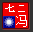
<style>
.page{position:relative;width:33px;height:32px;background:#f20000}
.page>*{position:absolute;margin:0}
.t1{font:10.4px "SimSun";color:#ffffff}
.t2{font:11.7px "SimSun";color:#ffffff}
</style>
<div class="page">
<p class="t1" style="left:5px;top:4px;width:20px;height:8px">七二</p>
<p class="t2" style="left:16px;top:15px;width:11px;height:12px">冯</p>
</div>
